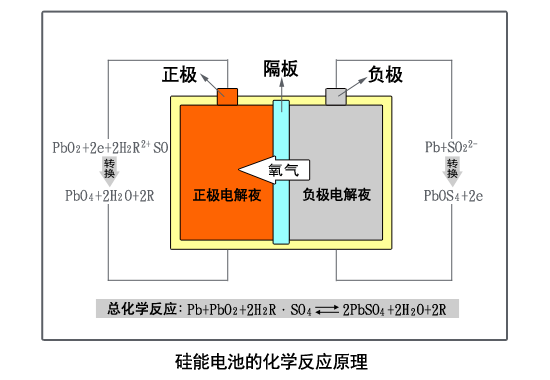
<style>
.page{position:relative;width:550px;height:380px;background:#ffffff}
.page>*{position:absolute;margin:0}
.t1{font:18.4px "DFHei-Md-80-Win-GB";letter-spacing:-0.025em;color:#010101}
.t2{font:14.5px "DFHei-Md-80-Win-GB";color:#5b5f65}
.t3{font:14.5px "DFHei-Md-80-Win-GB";letter-spacing:-0.05em;color:#5b5f65}
.t4{font:14.5px "DFHei-Md-80-Win-GB";letter-spacing:-0.1em;color:#5b5f65}
.t5{font:9.3px "DFHei-Md-80-Win-GB";color:#5b5f65}
.t6{font:9.3px "DFHei-Md-80-Win-GB"}
.t7{font:10px/1.7px "DFHei-Md-80-Win-GB";color:#000000;text-transform:uppercase;scale:1.16 1}
.t8{font:13.7px "DFHei-Md-80-Win-GB";color:#000000;text-transform:uppercase;scale:1.16 1}
.t9{font:14.2px "DFHei-Md-80-Win-GB";letter-spacing:-0.025em;color:#000000}
.t10{font:14px "DFHei-Md-80-Win-GB";color:#000000}
.t11{font:14.5px "DFHei-Md-80-Win-GB";color:#000000}
.t12{font:9.3px "DFHei-Md-80-Win-GB";color:#0c0c0c}
.t13{font:9.3px "DFHei-Md-80-Win-GB";color:#000000}
.t14{font:18px "SimHei";letter-spacing:-0.025em;color:#010101}
</style>
<div class="page">
<p class="t1" style="left:162px;top:65px;width:35px;height:18px">正极</p>
<p class="t1" style="left:264px;top:59px;width:35px;height:18px">隔板</p>
<p class="t1" style="left:368px;top:65px;width:35px;height:18px">负极</p>
<p class="t2" style="left:52px;top:141px;width:116px;height:13px">PbO +2e+2<span class="t3">H </span><span class="t4">R</span>  SO</p>
<p class="t5" style="left:76px;top:145px;width:4px;height:8px">2</p>
<p class="t6" style="left:127px;top:145px;width:4px;height:8px">2</p>
<p class="t5" style="left:141px;top:140px;width:10px;height:8px">2+</p>
<p class="t2" style="left:425px;top:141px;width:37px;height:12px">Pb+SO</p>
<p class="t6" style="left:463px;top:144px;width:4px;height:8px">2</p>
<p class="t5" style="left:468px;top:140px;width:10px;height:8px">2-</p>
<p class="t7" style="left:104px;top:158px;width:11px;height:20px;text-align:center">转换</p>
<p class="t7" style="left:447px;top:158px;width:11px;height:20px;text-align:center">转换</p>
<p class="t8" style="left:268px;top:163px;width:31px;height:14px">氧气</p>
<p class="t2" style="left:65px;top:189px;width:89px;height:13px">PbO +2H O+2<span class="t4">R</span></p>
<p class="t5" style="left:89px;top:193px;width:5px;height:8px">4</p>
<p class="t6" style="left:118px;top:193px;width:4px;height:8px">2</p>
<p class="t9" style="left:193px;top:188px;width:69px;height:14px">正极电解夜</p>
<p class="t9" style="left:302px;top:187px;width:69px;height:15px">负极电解夜</p>
<p class="t2" style="left:424px;top:189px;width:59px;height:13px">PbOS +2e</p>
<p class="t5" style="left:455px;top:193px;width:5px;height:8px">4</p>
<p class="t10" style="left:107px;top:301px;width:75px;height:15px">总化学反应：</p>
<p class="t11" style="left:187px;top:303px;width:259px;height:13px">Pb+PbO +2H R·SO     2PbSO +2H O+2R</p>
<p class="t12" style="left:233px;top:307px;width:4px;height:8px">2</p>
<p class="t6" style="left:263px;top:307px;width:4px;height:8px">2</p>
<p class="t13" style="left:307px;top:308px;width:5px;height:8px">4</p>
<p class="t13" style="left:380px;top:308px;width:5px;height:8px">4</p>
<p class="t13" style="left:411px;top:308px;width:4px;height:8px">2</p>
<p class="t14" style="left:175px;top:352px;width:193px;height:18px">硅能电池的化学反应原理</p>
</div>
